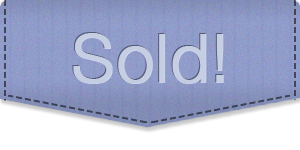
<style>
.page{position:relative;width:300px;height:150px;background:#ffffff}
.page>*{position:absolute;margin:0}
.t1{font:66.7px "HelveticaNeue-Light";letter-spacing:0.01em;color:#c6cee3;font-weight:bold}
.t2{font:66.7px "HelveticaNeue-Light";letter-spacing:0.01em;color:#d2daef;font-weight:bold}
</style>
<div class="page">
<p class="t1" style="left:72px;top:32px;width:151px;height:51px">Sold!</p>
<p class="t2" style="left:73px;top:33px;width:151px;height:51px;opacity:0.9">Sold!</p>
</div>
